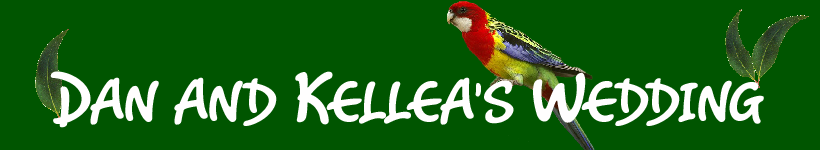
<style>
.page{position:relative;width:820px;height:150px;background:#005500}
.page>*{position:absolute;margin:0}
.t1{font:72px "RomyCaps";color:#fffefe}
</style>
<div class="page">
<p class="t1" style="left:50px;top:71px;width:714px;height:57px">Dan and Kellea’s Wedding</p>
</div>
